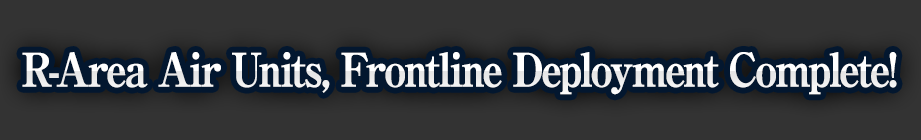
<style>
.page{position:relative;width:921px;height:140px;background:#333333}
.page>*{position:absolute;margin:0}
.t1{font:46px "RyuminPro-ExBold";letter-spacing:-0.08em;color:#ffffff;font-weight:bold;scale:0.9 1}
</style>
<div class="page">
<p class="t1" style="left:22px;top:52px;width:875px;height:43px">R-Area Air Units, Frontline Deployment Complete!</p>
</div>
